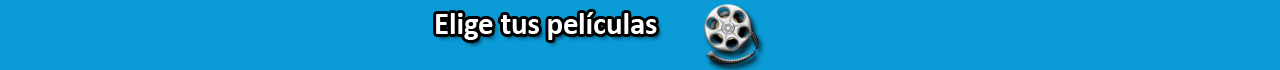
<style>
.page{position:relative;width:1280px;height:70px;background:#0b9bd6}
.page>*{position:absolute;margin:0}
.t1{font:30.6px "Calibri-Bold";color:#ffffff}
</style>
<div class="page">
<p class="t1" style="left:436px;top:12px;width:221px;height:28px">Elige tus películas</p>
</div>
